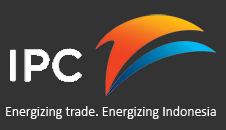
<style>
.page{position:relative;width:226px;height:130px;background:#333333}
.page>*{position:absolute;margin:0}
.t1{font:13.7px "Calibri";color:#ffffff}
</style>
<div class="page">
<p class="t1" style="left:6px;top:106px;width:210px;height:13px">Energizing trade. Energizing Indonesia</p>
</div>
